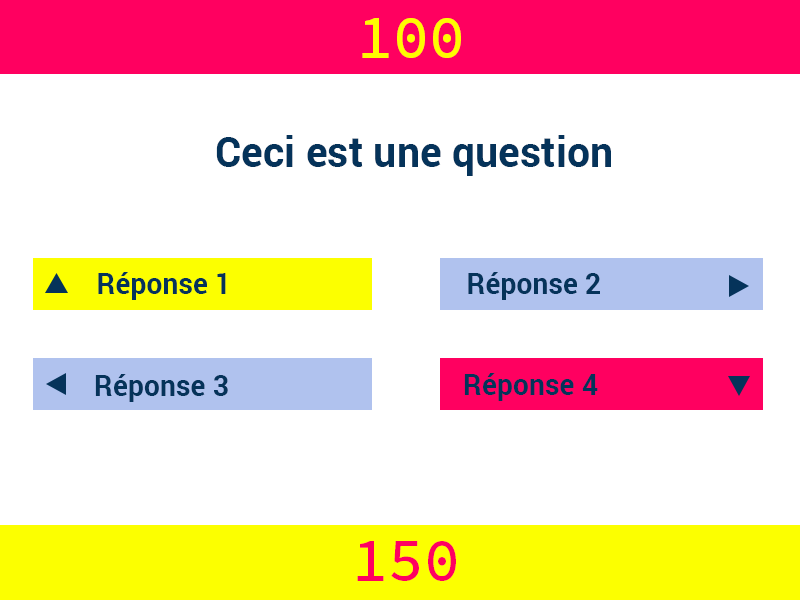
<style>
.page{position:relative;width:800px;height:600px;background:#ffffff}
.page>*{position:absolute;margin:0}
.t1{font:61px "SourceCodePro-Medium";color:#fffc00}
.t2{font:42px "Roboto-Bold";color:#05335a}
.t3{font:29px "Roboto-Bold";color:#05335a}
.t4{font:61px "SourceCodePro-Medium";color:#ff0060}
</style>
<div class="page">
<p class="t1" style="left:362px;top:18px;width:99px;height:40px">100</p>
<p class="t2" style="left:216px;top:135px;width:395px;height:41px">Ceci est une question</p>
<p class="t3" style="left:98px;top:272px;width:128px;height:28px">Réponse 1</p>
<p class="t3" style="left:98px;top:272px;width:128px;height:28px">Réponse 1</p>
<p class="t3" style="left:468px;top:272px;width:132px;height:28px">Réponse 2</p>
<p class="t3" style="left:95px;top:374px;width:133px;height:28px">Réponse 3</p>
<p class="t3" style="left:464px;top:373px;width:134px;height:28px">Réponse 4</p>
<p class="t3" style="left:464px;top:373px;width:134px;height:28px">Réponse 4</p>
<p class="t4" style="left:357px;top:541px;width:99px;height:40px">150</p>
</div>
